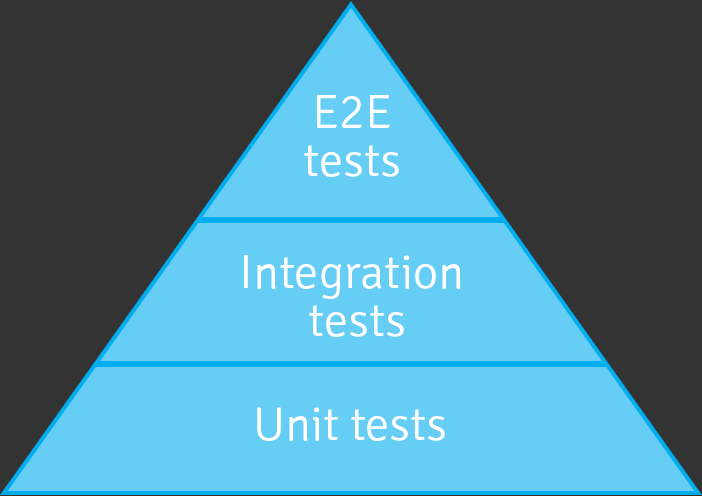
<style>
.page{position:relative;width:702px;height:496px;background:#333333}
.page>*{position:absolute;margin:0}
.t1{font:48px/48px "Signika-Light";color:#ffffff}
.t2{font:48px "Signika-Light";color:#ffffff}
</style>
<div class="page">
<p class="t1" style="left:304px;top:95px;width:95px;height:82px;text-align:center">E2E<br>tests</p>
<p class="t1" style="left:244px;top:255px;width:217px;height:82px;text-align:center">Integration <br>tests</p>
<p class="t2" style="left:257px;top:407px;width:188px;height:34px">Unit tests</p>
</div>
